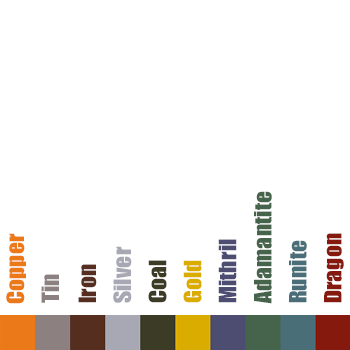
<style>
.page{position:relative;width:350px;height:350px;background:#ffffff}
.page>*{position:absolute;margin:0}
.t1{font:22.1px "Impact";color:#46634b;scale:1.08 1}
.t2{font:22.1px "Impact";color:#eb7919;scale:1.08 1}
.t3{font:22.1px "Impact";color:#85190e;scale:1.08 1}
.t4{font:22.1px "Impact";color:#a7a8b3;scale:1.08 1}
.t5{font:22.1px "Impact";color:#4c4d71;scale:1.08 1}
.t6{font:22.1px "Impact";color:#496e78;scale:1.08 1}
.t7{font:22.1px "Impact";color:#552e20;scale:1.08 1}
.t8{font:22.1px "Impact";color:#3c3b25;scale:1.08 1}
.t9{font:22.1px "Impact";color:#dbac00;scale:1.08 1}
.t10{font:22.1px "Impact";color:#8c8080;scale:1.08 1}
</style>
<div class="page">
<p class="t1" style="left:254px;top:191px;width:18px;height:113px;rotate:-90deg">Adamantite</p>
<p class="t2" style="left:6px;top:233px;width:20px;height:71px;rotate:-90deg">Copper</p>
<p class="t3" style="left:324px;top:233px;width:20px;height:70px;rotate:-90deg">Dragon</p>
<p class="t4" style="left:113px;top:246px;width:19px;height:57px;rotate:-90deg">Silver</p>
<p class="t5" style="left:218px;top:239px;width:19px;height:64px;rotate:-90deg">Mithril</p>
<p class="t6" style="left:289px;top:240px;width:18px;height:63px;rotate:-90deg">Runite</p>
<p class="t7" style="left:78px;top:264px;width:19px;height:39px;rotate:-90deg">Iron</p>
<p class="t8" style="left:148px;top:260px;width:19px;height:43px;rotate:-90deg">Coal</p>
<p class="t9" style="left:183px;top:260px;width:19px;height:43px;rotate:-90deg">Gold</p>
<p class="t10" style="left:41px;top:274px;width:18px;height:29px;rotate:-90deg">Tin</p>
</div>
